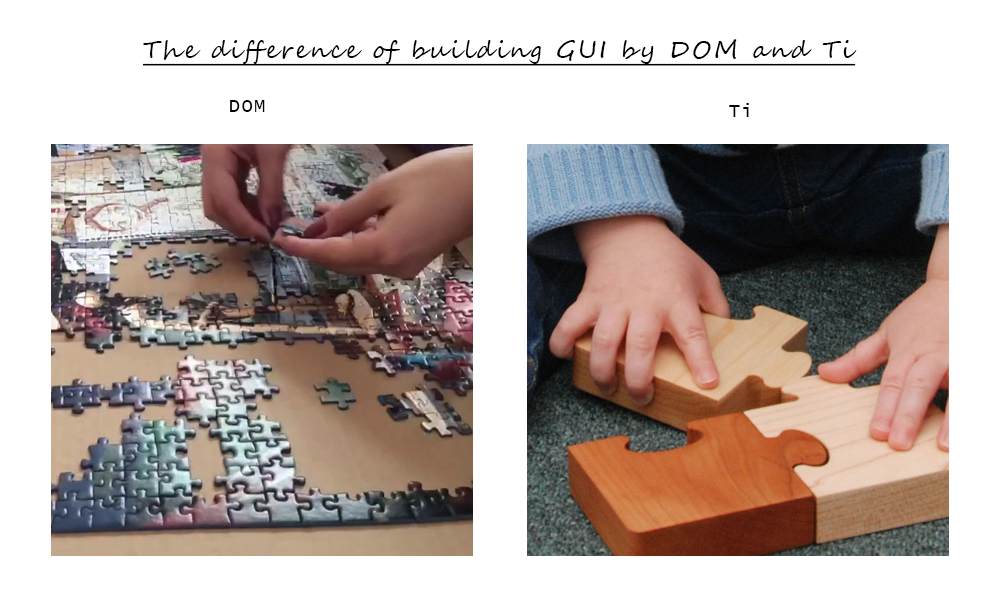
<style>
.page{position:relative;width:1000px;height:600px;background:#ffffff}
.page>*{position:absolute;margin:0}
.t1{font:24px "SegoeScript";letter-spacing:0.1em;color:#000000;text-decoration:underline}
.t2{font:18px "LucidaConsole";letter-spacing:0.1em;color:#000000}
</style>
<div class="page">
<p class="t1" style="left:143px;top:39px;width:714px;height:27px">The difference of building GUI by DOM and Ti</p>
<p class="t2" style="left:230px;top:100px;width:35px;height:12px">DOM</p>
<p class="t2" style="left:729px;top:103px;width:20px;height:14px">Ti</p>
</div>
